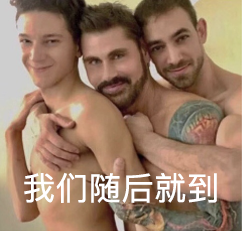
<style>
.page{position:relative;width:242px;height:231px}
.page>*{position:absolute;margin:0}
.t1{font:32px "PingFangSC-Regular";color:#ffffff;font-weight:bold}
</style>
<div class="page">
<p class="t1" style="left:24px;top:172px;width:193px;height:31px">我们随后就到</p>
</div>
